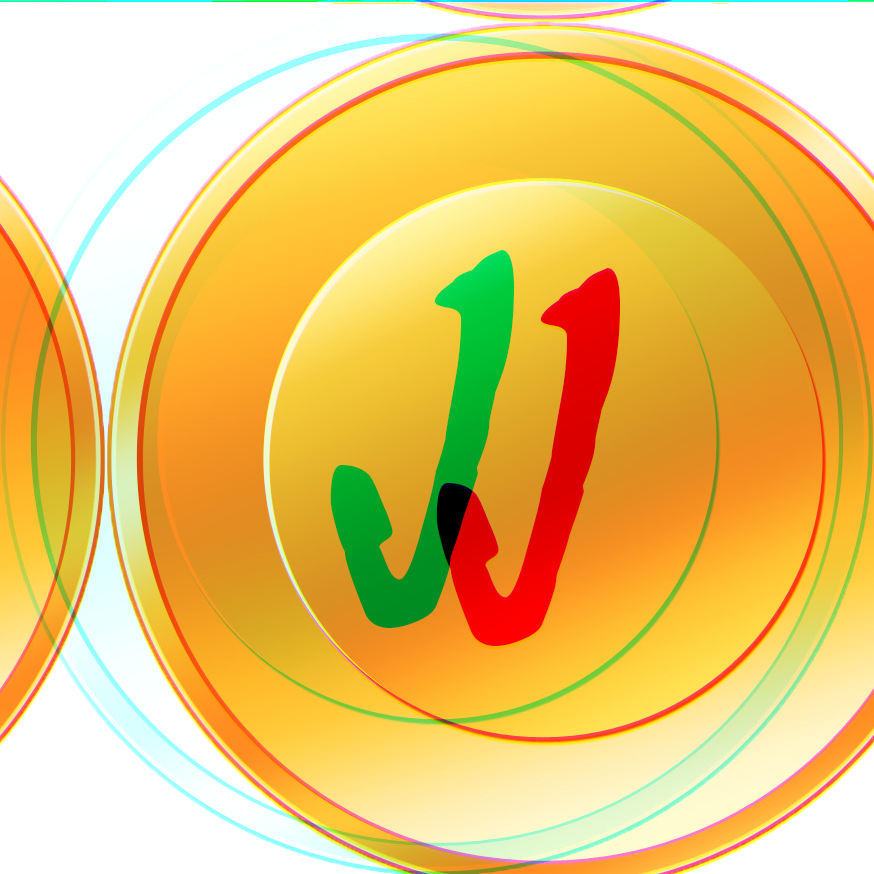
<style>
.page{position:relative;width:874px;height:874px}
.page>*{position:absolute;margin:0}
.t1{font:548px "Mistral"}
</style>
<div class="page">
<p class="t1" style="left:330px;top:248px;width:185px;height:378px">J</p>
</div>
